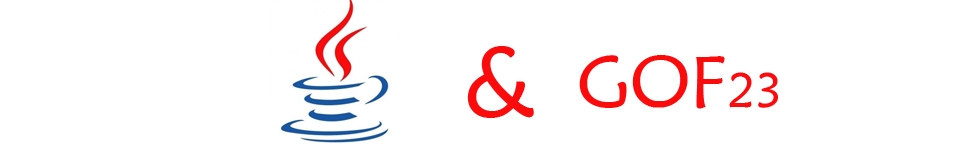
<style>
.page{position:relative;width:977px;height:150px;background:#ffffff}
.page>*{position:absolute;margin:0}
.t1{font:100px "STXinwei";color:#fb0b0c}
.t2{font:72px "STXinwei";color:#fb0b0c}
.t3{font:48px "STXinwei";color:#fb0b0c}
</style>
<div class="page">
<p class="t1" style="left:467px;top:46px;width:67px;height:72px">&amp;</p>
<p class="t2" style="left:579px;top:55px;width:199px;height:54px">GOF<span class="t3">23</span></p>
</div>
